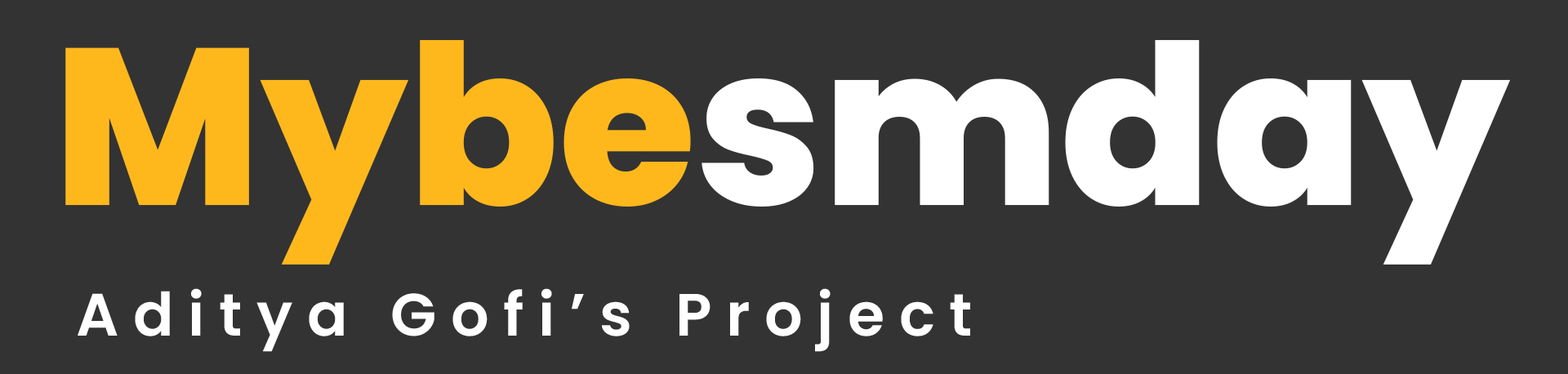
<style>
.page{position:relative;width:1568px;height:374px;background:#333333}
.page>*{position:absolute;margin:0}
.t1{font:222.8px "Poppins-ExtraBold";color:#ffffff}
.t2{font:222.8px "Poppins-ExtraBold";color:#ffb81c}
.t3{font:59.8px "Poppins-SemiBold";letter-spacing:0.24em;color:#ffffff}
</style>
<div class="page">
<p class="t1" style="left:65px;top:40px;width:1446px;height:225px"><span class="t2">Mybe</span>smday</p>
<p class="t3" style="left:78px;top:288px;width:892px;height:64px">Aditya Gofi’s Project</p>
</div>
